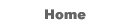
<style>
.page{position:relative;width:130px;height:27px;background:#ffffff}
.page>*{position:absolute;margin:0}
.t1{font:13.3px "Arial-Black";color:#646464}
</style>
<div class="page">
<p class="t1" style="left:45px;top:9px;width:41px;height:11px">Home</p>
</div>
